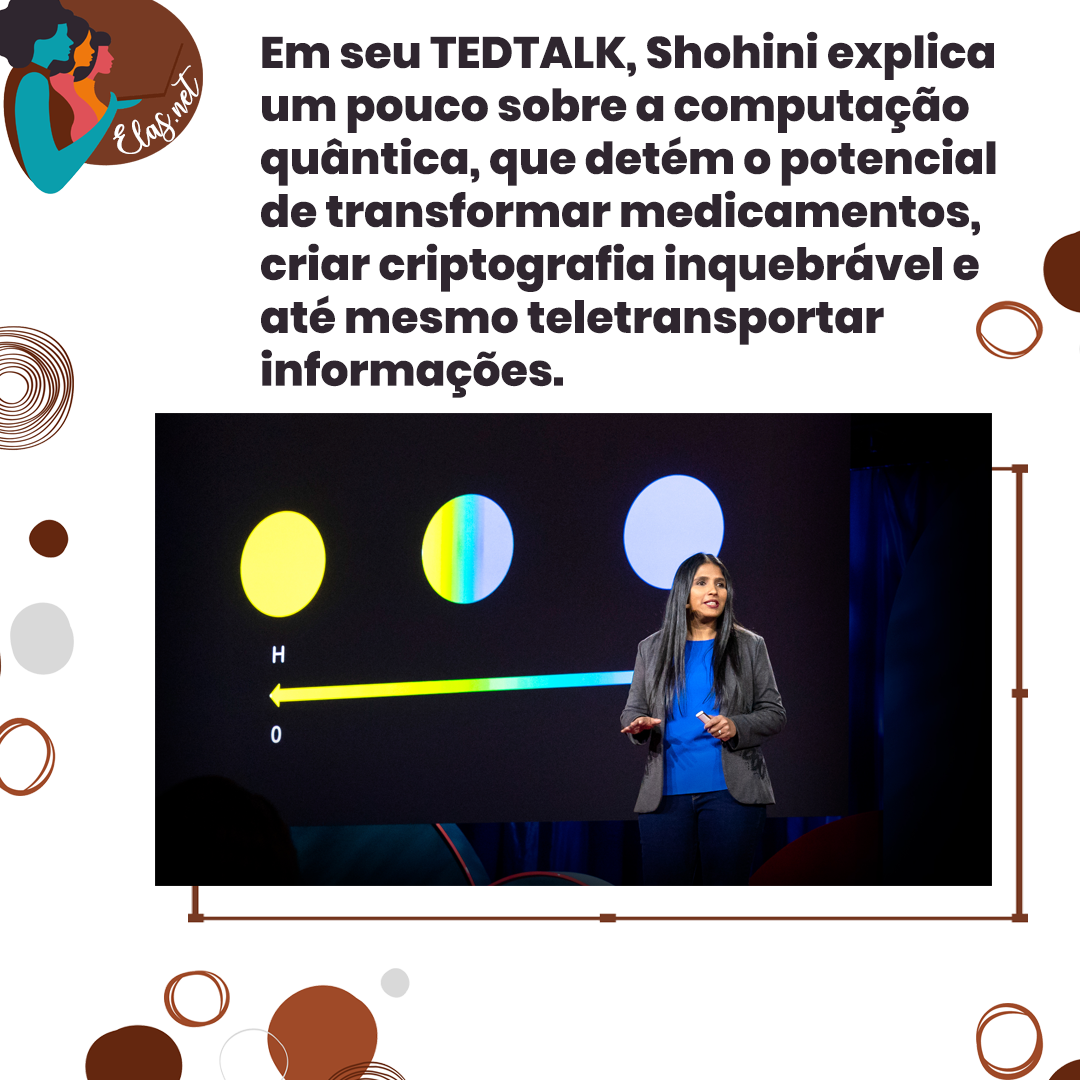
<style>
.page{position:relative;width:1080px;height:1080px;background:#ffffff}
.page>*{position:absolute;margin:0}
.t1{font:44.1px "Poppins-ExtraBold";color:#2f262f}
.t2{font:25px "charlinda-Regular";color:#ffffff;scale:1.18 1}
</style>
<div class="page">
<p class="t1" style="left:261px;top:31px;width:735px;height:367px">Em seu TEDTALK, Shohini explica<br>um pouco sobre a computação<br>quântica, que detém o potencial <br>de transformar medicamentos, <br>criar criptografia inquebrável e <br>até mesmo teletransportar <br>informações.</p>
<p class="t2" style="left:113px;top:65px;width:86px;height:89px;rotate:-43deg">Elas.net</p>
</div>
